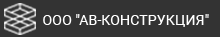
<style>
.page{position:relative;width:220px;height:37px;background:#333333}
.page>*{position:absolute;margin:0}
.t1{font:14px "Roboto-Regular";color:#ffffff}
</style>
<div class="page">
<p class="t1" style="left:43px;top:14px;width:166px;height:13px">ООО "АВ-КОНСТРУКЦИЯ"</p>
</div>
